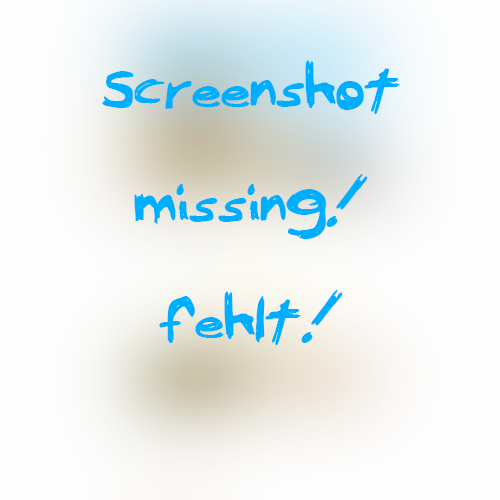
<style>
.page{position:relative;width:500px;height:500px}
.page>*{position:absolute;margin:0}
.t1{font:48px "Serpico";color:#00aeff}
</style>
<div class="page">
<p class="t1" style="left:102px;top:60px;width:298px;height:285px;text-align:center">Screenshot<br><br>missing!<br><br>fehlt!</p>
</div>
